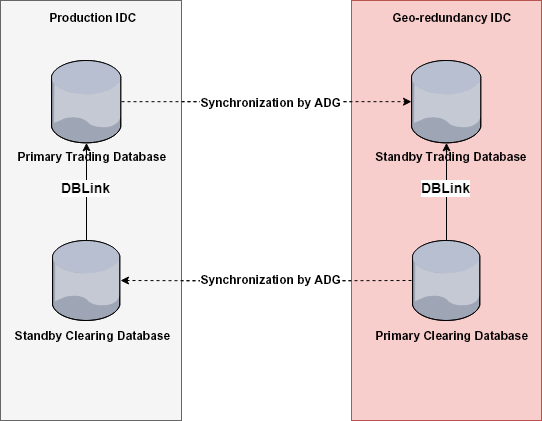
<style>
.page{position:relative;width:542px;height:421px;background:#ffffff}
.page>*{position:absolute;margin:0}
.t1{font:12px "Arial-BoldMT";color:#000000}
</style>
<div class="page">
<p class="t1" style="left:50px;top:12px;width:86px;height:10px">Production IDC</p>
<p class="t1" style="left:393px;top:13px;width:118px;height:11px">Geo-redundancy IDC</p>
<p class="t1" style="left:201px;top:97px;width:139px;height:12px">Synchronization by ADG</p>
<p class="t1" style="left:18px;top:151px;width:148px;height:12px">Primary Trading Database</p>
<p class="t1" style="left:375px;top:151px;width:151px;height:12px">Standby Trading Database</p>
<p class="t1" style="left:201px;top:274px;width:139px;height:12px">Synchronization by ADG</p>
<p class="t1" style="left:15px;top:330px;width:155px;height:12px">Standby Clearing Database</p>
<p class="t1" style="left:376px;top:330px;width:152px;height:12px">Primary Clearing Database</p>
</div>
